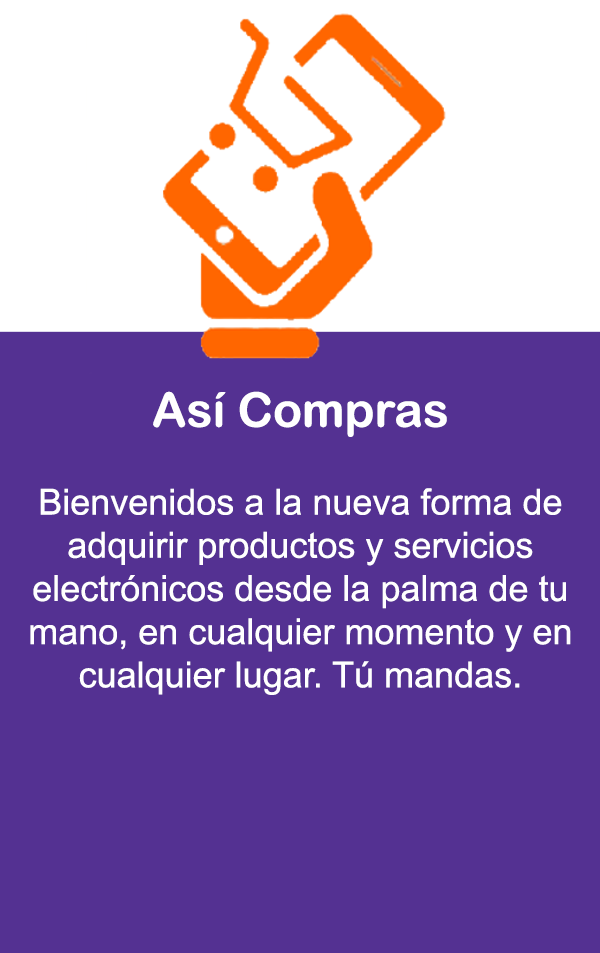
<style>
.page{position:relative;width:600px;height:953px;background:#543192}
.page>*{position:absolute;margin:0}
.t1{font:36px "ArialMT";color:#ffffff}
.t2{font:48px "ArialRoundedMTBold";color:#ffffff}
</style>
<div class="page">
<p class="t1" style="left:30px;top:391px;width:541px;height:304px;text-align:center"><span class="t2">Así Compras<br><br></span>Bienvenidos a la nueva forma de adquirir productos y servicios electrónicos desde la palma de tu mano, en cualquier momento y en cualquier lugar. Tú mandas.</p>
</div>
